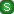
<style>
.page{position:relative;width:14px;height:14px}
.page>*{position:absolute;margin:0}
.t1{font:11px "ArialMT";letter-spacing:-0.05em;color:#ffffff}
</style>
<div class="page">
<p class="t1" style="left:4px;top:3px;width:6px;height:8px">S</p>
</div>
